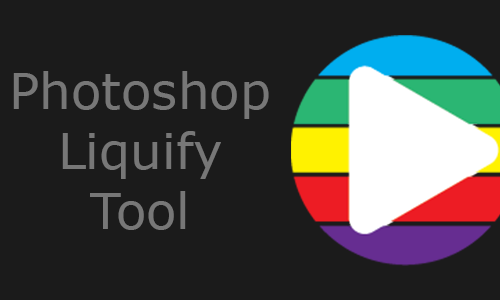
<style>
.page{position:relative;width:500px;height:300px;background:#1b1b1b}
.page>*{position:absolute;margin:0}
.t1{font:50px "Verdana";color:#777777}
</style>
<div class="page">
<p class="t1" style="left:13px;top:71px;width:256px;height:159px;text-align:center">Photoshop<br>Liquify<br>Tool</p>
</div>
